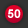
<style>
.page{position:relative;width:28px;height:28px;background:#333333}
.page>*{position:absolute;margin:0}
.t1{font:12px "Arial-BoldMT";color:#ffffff}
</style>
<div class="page">
<p class="t1" style="left:7px;top:9px;width:14px;height:9px">50</p>
</div>
